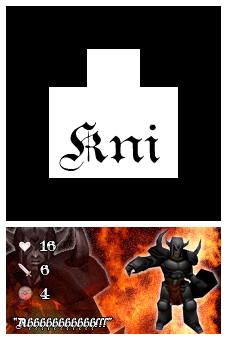
<style>
.page{position:relative;width:227px;height:340px;background:#000000}
.page>*{position:absolute;margin:0}
.t1{font:52px "TeutonicNo1-DemiBold";color:#000000}
.t2{font:16px/24px "TeutonicNo4-DemiBold";color:#fefefe}
.t3{font:12px "TeutonicNo2-DemiBold";color:#ffffff;font-style:italic}
</style>
<div class="page">
<p class="t1" style="left:59px;top:122px;width:101px;height:49px">Kni</p>
<p class="t2" style="left:40px;top:240px;width:16px;height:59px">16<br>6<br>4</p>
<p class="t3" style="left:13px;top:317px;width:99px;height:13px">“Ahhhhhhhhhhh!!!”</p>
</div>
